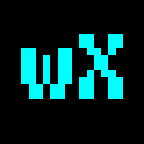
<style>
.page{position:relative;width:144px;height:144px;background:#000000}
.page>*{position:absolute;margin:0}
.t1{font:93px "Fixedsys";color:#00ffff}
</style>
<div class="page">
<p class="t1" style="left:21px;top:34px;width:102px;height:65px">wX</p>
</div>
